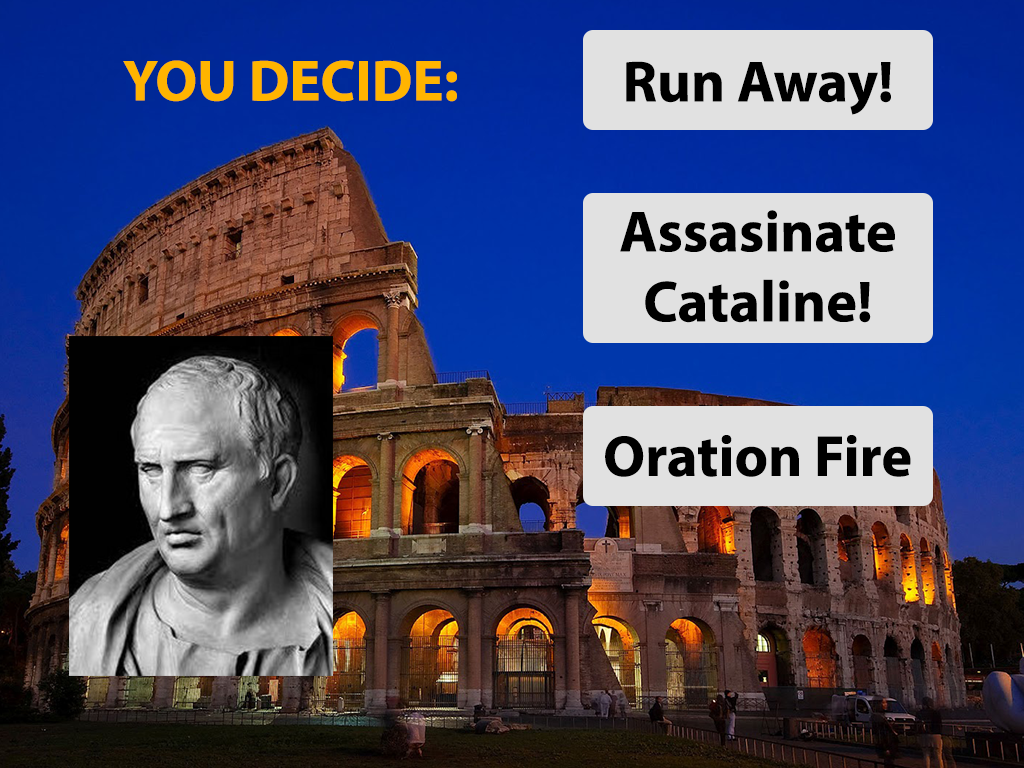
<style>
.page{position:relative;width:1024px;height:768px}
.page>*{position:absolute;margin:0}
.t1{font:58.3px "MyriadPro-Bold";color:#ffb400}
.t2{font:58.3px "MyriadPro-Bold";color:#000000}
</style>
<div class="page">
<p class="t1" style="left:123px;top:60px;width:334px;height:42px">YOU DECIDE:</p>
<p class="t2" style="left:626px;top:61px;width:265px;height:54px">Run Away!</p>
<p class="t2" style="left:620px;top:210px;width:275px;height:113px;text-align:center">Assasinate<br>Cataline!</p>
<p class="t2" style="left:605px;top:435px;width:306px;height:42px">Oration Fire</p>
</div>
